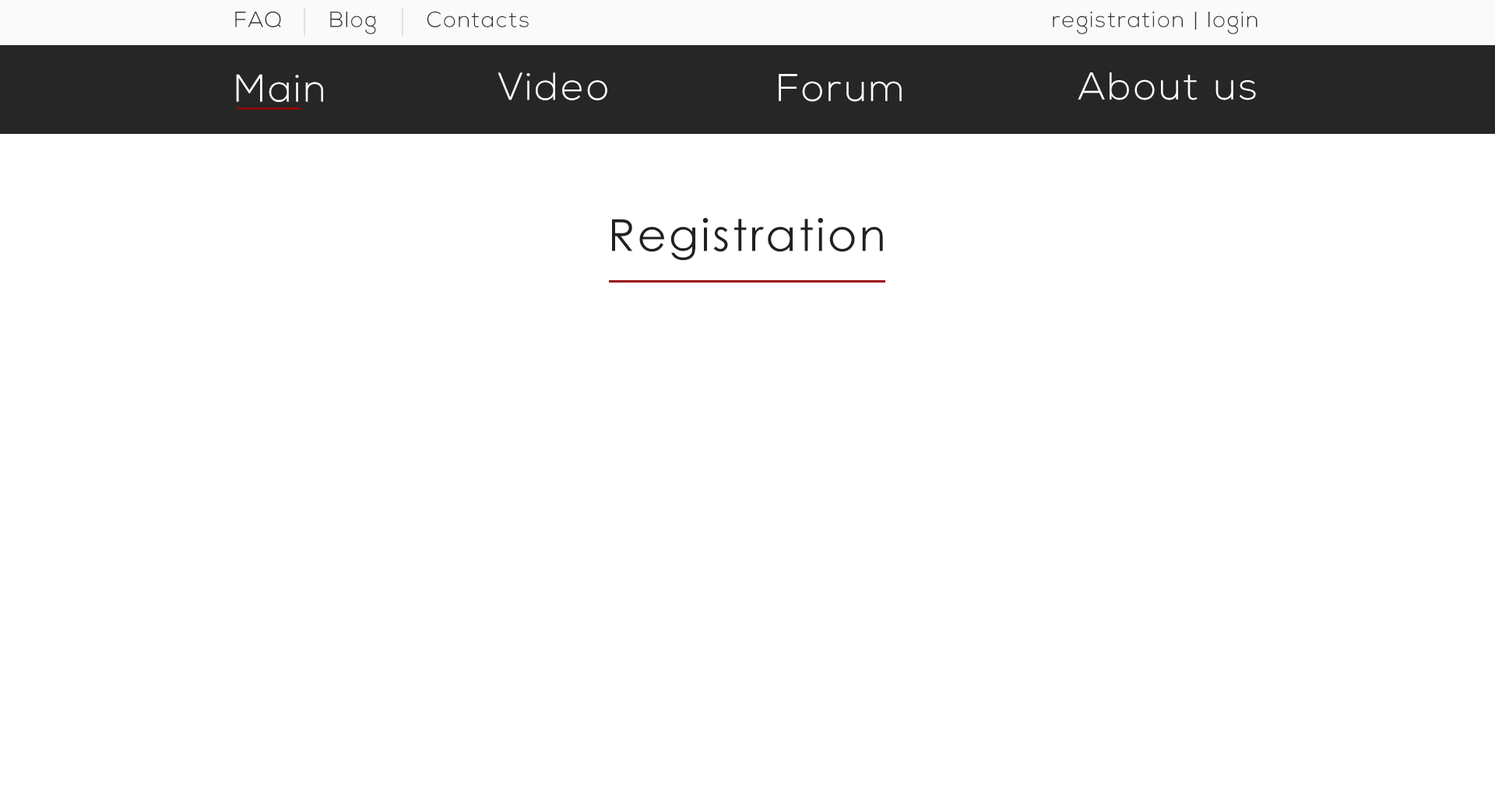
<style>
.page{position:relative;width:1495px;height:797px;background:#ffffff}
.page>*{position:absolute;margin:0}
.t1{font:22.1px "NexaLight";letter-spacing:0.06em;color:#303030}
.t2{font:38.6px "NexaLight";letter-spacing:0.06em;color:#fdfdfd}
.t3{font:44.1px "CenturyGothic";letter-spacing:0.06em;color:#212121}
</style>
<div class="page">
<p class="t1" style="left:235px;top:11px;width:46px;height:16px">FAQ</p>
<p class="t1" style="left:330px;top:12px;width:46px;height:22px">Blog</p>
<p class="t1" style="left:427px;top:11px;width:102px;height:16px">Contacts</p>
<p class="t1" style="left:1053px;top:12px;width:205px;height:22px">registration | login</p>
<p class="t2" style="left:236px;top:74px;width:87px;height:28px">Main</p>
<p class="t2" style="left:498px;top:72px;width:109px;height:28px">Video</p>
<p class="t2" style="left:779px;top:74px;width:123px;height:28px">Forum</p>
<p class="t2" style="left:1078px;top:72px;width:178px;height:28px">About us</p>
<p class="t3" style="left:612px;top:218px;width:271px;height:43px">Registration</p>
</div>
